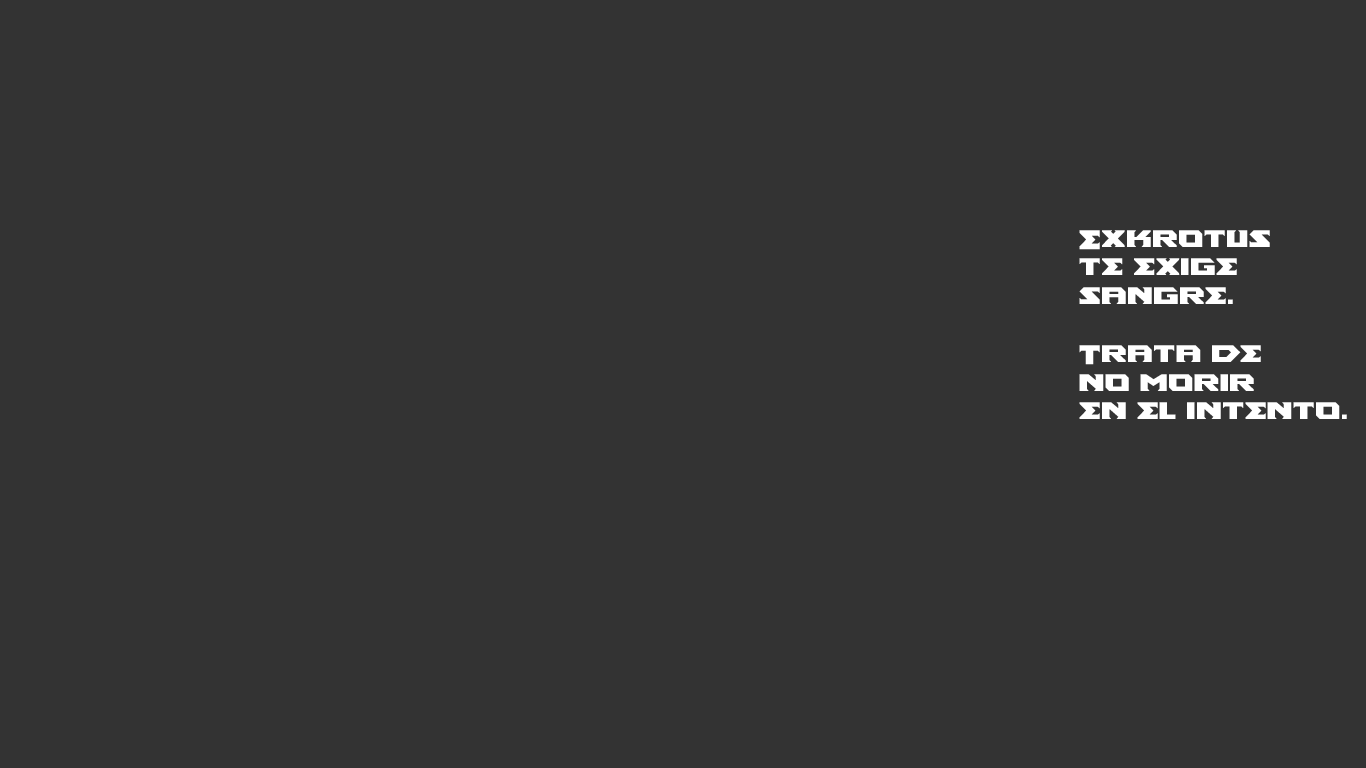
<style>
.page{position:relative;width:1366px;height:768px;background:#333333}
.page>*{position:absolute;margin:0}
.t1{font:24px "AncientGod-Bold";color:#ffffff}
</style>
<div class="page">
<p class="t1" style="left:1079px;top:230px;width:268px;height:189px">Exkrotus <br>te exige<br>sangre.<br><br>Trata de<br>no morir <br>en el intento.</p>
</div>
